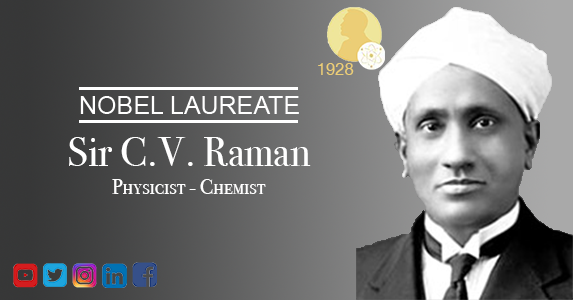
<style>
.page{position:relative;width:573px;height:300px}
.page>*{position:absolute;margin:0}
.t1{font:16.7px "HelveticaNeue";color:#ecce76}
.t2{font:41.7px "BodoniSvtyTwoITCTT-Book";color:#ffffff}
.t3{font:20.8px "BodoniSvtyTwoSCITCTT-Book";color:#ffffff}
</style>
<div class="page">
<p class="t1" style="left:318px;top:63px;width:36px;height:12px">1928</p>
<p class="t2" style="left:69px;top:137px;width:242px;height:29px">Sir C.V. Raman</p>
<p class="t3" style="left:112px;top:179px;width:154px;height:15px">Physicist - Chemist</p>
</div>
